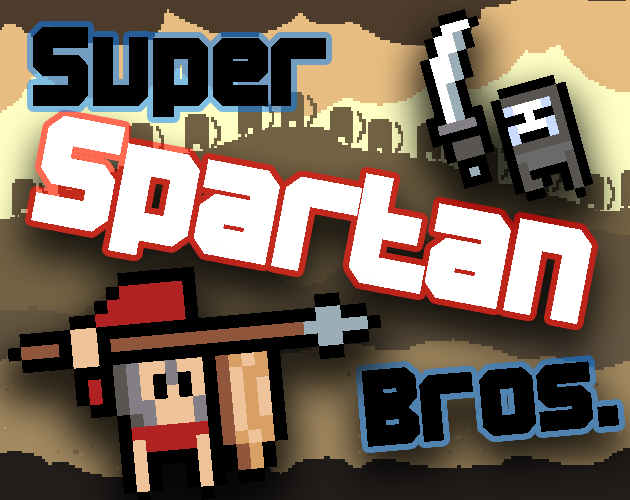
<style>
.page{position:relative;width:630px;height:500px}
.page>*{position:absolute;margin:0}
.t1{font:110.7px "BNMachine";color:#000000}
.t2{font:150.1px "BNMachine";color:#ffffff}
.t3{font:105.9px "BNMachine";color:#000000}
</style>
<div class="page">
<p class="t1" style="left:33px;top:27px;width:293px;height:90px">Super</p>
<p class="t2" style="left:31px;top:116px;width:561px;height:208px;rotate:11deg">Spartan</p>
<p class="t3" style="left:362px;top:361px;width:257px;height:86px;rotate:-5deg">Bros.</p>
</div>
